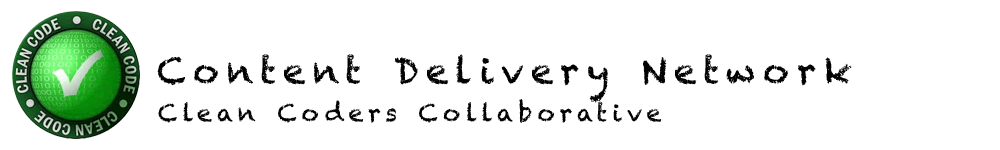
<style>
.page{position:relative;width:1000px;height:150px;background:#ffffff}
.page>*{position:absolute;margin:0}
.t1{font:36px "Chalkduster";letter-spacing:0.2em;color:#000000}
.t2{font:24px "Chalkduster";letter-spacing:0.2em;color:#000000}
</style>
<div class="page">
<p class="t1" style="left:157px;top:54px;width:695px;height:49px">Content Delivery Network</p>
<p class="t2" style="left:158px;top:99px;width:504px;height:24px">Clean Coders Collaborative</p>
</div>
